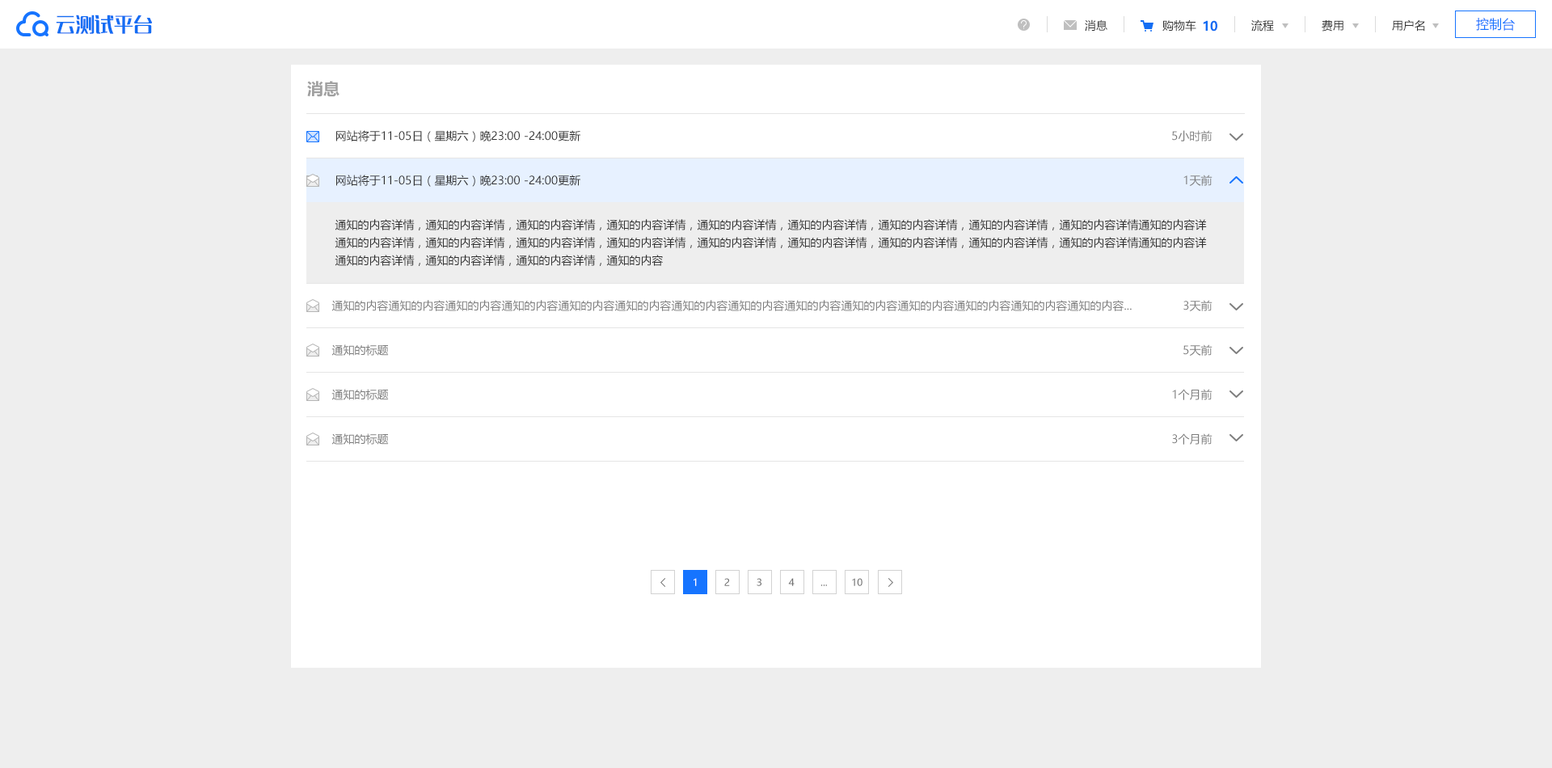
<style>
.page{position:relative;width:1552px;height:768px;background:#eeeeee}
.page>*{position:absolute;margin:0}
.t1{font:19.4px "MFLangQian_Noncommercial-Regular";color:#136df3}
.t2{font:12.9px "MicrosoftYaHei";color:#1674ff}
.t3{font:11.3px "MicrosoftYaHei";color:#313131}
.t4{font:12.9px "MicrosoftYaHei-Bold";color:#136df3}
.t5{font:16.2px "MicrosoftYaHei-Bold";color:#a0a0a0}
.t6{font:11.3px "MicrosoftYaHei";color:#7d7d7d}
.t7{font:11.3px/17.8px "MicrosoftYaHei";color:#313131}
.t8{font:9.7px "MicrosoftYaHei";color:#ffffff}
.t9{font:9.7px "MicrosoftYaHei";color:#707070}
.t10{font:9.7px "MicrosoftYaHei"}
</style>
<div class="page">
<p class="t1" style="left:56px;top:15px;width:96px;height:19px">云测试平台</p>
<p class="t2" style="left:1476px;top:18px;width:39px;height:13px">控制台</p>
<p class="t3" style="left:1085px;top:19px;width:23px;height:13px">消息</p>
<p class="t3" style="left:1163px;top:19px;width:34px;height:13px">购物车</p>
<p class="t4" style="left:1203px;top:20px;width:15px;height:12px">10</p>
<p class="t3" style="left:1252px;top:19px;width:22px;height:13px">流程</p>
<p class="t3" style="left:1322px;top:20px;width:22px;height:12px">费用</p>
<p class="t3" style="left:1392px;top:19px;width:33px;height:13px">用户名</p>
<p class="t5" style="left:307px;top:81px;width:33px;height:16px">消息</p>
<p class="t3" style="left:336px;top:130px;width:245px;height:12px">网站将于11-05日（星期六）晚23:00 -24:00更新</p>
<p class="t6" style="left:1172px;top:130px;width:41px;height:11px">5小时前</p>
<p class="t3" style="left:336px;top:175px;width:245px;height:12px">网站将于11-05日（星期六）晚23:00 -24:00更新</p>
<p class="t6" style="left:1184px;top:175px;width:29px;height:11px">1天前</p>
<p class="t7" style="left:335px;top:219px;width:872px;height:47px">通知的内容详情，通知的内容详情，通知的内容详情，通知的内容详情，通知的内容详情，通知的内容详情，通知的内容详情，通知的内容详情，通知的内容详情通知的内容详<br>通知的内容详情，通知的内容详情，通知的内容详情，通知的内容详情，通知的内容详情，通知的内容详情，通知的内容详情，通知的内容详情，通知的内容详情通知的内容详<br>通知的内容详情，通知的内容详情，通知的内容详情，通知的内容</p>
<p class="t6" style="left:332px;top:300px;width:800px;height:11px">通知的内容通知的内容通知的内容通知的内容通知的内容通知的内容通知的内容通知的内容通知的内容通知的内容通知的内容通知的内容通知的内容通知的内容...</p>
<p class="t6" style="left:1184px;top:300px;width:29px;height:11px">3天前</p>
<p class="t6" style="left:332px;top:344px;width:57px;height:12px">通知的标题</p>
<p class="t6" style="left:1184px;top:344px;width:29px;height:12px">5天前</p>
<p class="t6" style="left:332px;top:389px;width:57px;height:11px">通知的标题</p>
<p class="t6" style="left:1172px;top:389px;width:41px;height:11px">1个月前</p>
<p class="t6" style="left:332px;top:433px;width:57px;height:12px">通知的标题</p>
<p class="t6" style="left:1172px;top:433px;width:41px;height:12px">3个月前</p>
<p class="t8" style="left:694px;top:578px;width:3px;height:8px">1</p>
<p class="t9" style="left:724px;top:578px;width:6px;height:8px">2</p>
<p class="t9" style="left:757px;top:578px;width:5px;height:8px">3</p>
<p class="t9" style="left:788px;top:578px;width:7px;height:8px">4</p>
<p class="t9" style="left:852px;top:578px;width:11px;height:8px">10</p>
<p class="t10" style="left:821px;top:585px;width:6px;height:1px">...</p>
</div>
